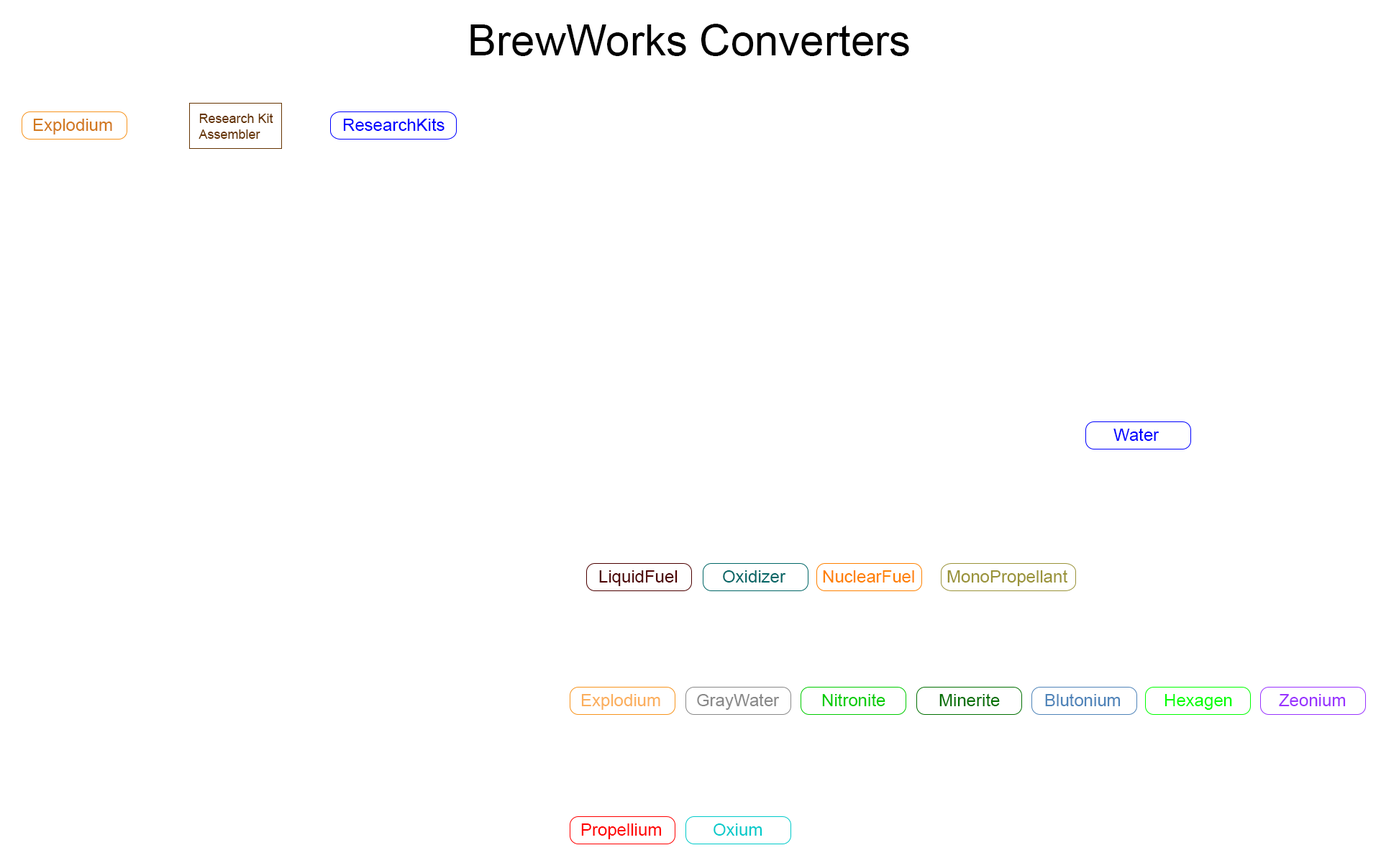
<style>
.page{position:relative;width:1381px;height:863px;background:#ffffff}
.page>*{position:absolute;margin:0}
.t1{font:43.2px "ArialMT";color:#000000}
.t2{font:12.9px "ArialMT";color:#663401}
.t3{font:17.3px "ArialMT";color:#d2791f}
.t4{font:17.3px "ArialMT";color:#0000ff}
.t5{font:17.3px "ArialMT";color:#9a9339}
.t6{font:17.3px "ArialMT";color:#4c0000}
.t7{font:17.3px "ArialMT";color:#006666}
.t8{font:17.3px "ArialMT";color:#ff8100}
.t9{font:17.3px "ArialMT";color:#fbaf5d}
.t10{font:17.3px "ArialMT";color:#898989}
.t11{font:17.3px "ArialMT";color:#00cc00}
.t12{font:17.3px "ArialMT";color:#027002}
.t13{font:17.3px "ArialMT";color:#4f84b9}
.t14{font:17.3px "ArialMT";color:#00ff00}
.t15{font:17.3px "ArialMT";color:#9933ff}
.t16{font:17.3px "ArialMT";color:#ff0000}
.t17{font:17.3px "ArialMT";color:#00caca}
</style>
<div class="page">
<p class="t1" style="left:470px;top:24px;width:439px;height:32px">BrewWorks Converters</p>
<p class="t2" style="left:199px;top:114px;width:74px;height:25px">Research Kit<br>Assembler</p>
<p class="t3" style="left:33px;top:119px;width:79px;height:16px">Explodium</p>
<p class="t4" style="left:343px;top:118px;width:102px;height:13px">ResearchKits</p>
<p class="t4" style="left:1114px;top:428px;width:46px;height:13px">Water</p>
<p class="t5" style="left:947px;top:570px;width:121px;height:16px">MonoPropellant</p>
<p class="t6" style="left:599px;top:570px;width:79px;height:16px">LiquidFuel</p>
<p class="t7" style="left:723px;top:570px;width:63px;height:13px">Oxidizer</p>
<p class="t8" style="left:823px;top:570px;width:91px;height:13px">NuclearFuel</p>
<p class="t9" style="left:581px;top:694px;width:79px;height:16px">Explodium</p>
<p class="t10" style="left:697px;top:694px;width:83px;height:16px">GrayWater</p>
<p class="t11" style="left:822px;top:694px;width:64px;height:12px">Nitronite</p>
<p class="t12" style="left:940px;top:694px;width:60px;height:12px">Minerite</p>
<p class="t13" style="left:1045px;top:694px;width:76px;height:12px">Blutonium</p>
<p class="t14" style="left:1165px;top:694px;width:67px;height:16px">Hexagen</p>
<p class="t15" style="left:1279px;top:694px;width:67px;height:12px">Zeonium</p>
<p class="t16" style="left:581px;top:824px;width:81px;height:16px">Propellium</p>
<p class="t17" style="left:714px;top:824px;width:49px;height:12px">Oxium</p>
</div>
